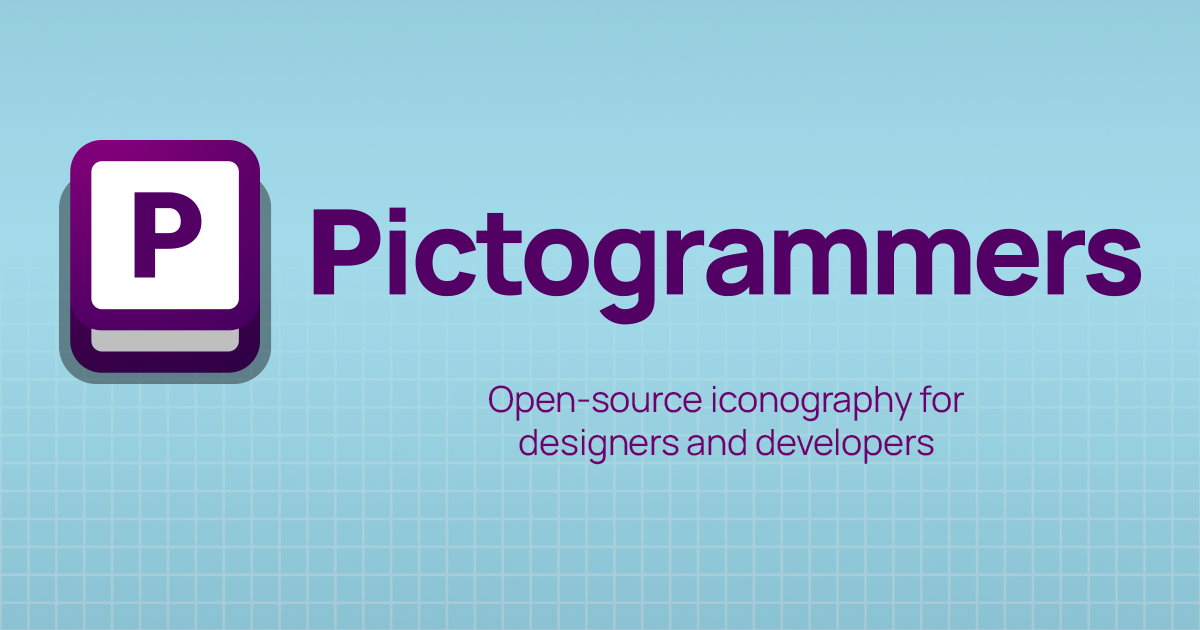
<style>
.page{position:relative;width:1200px;height:630px}
.page>*{position:absolute;margin:0}
.t1{font:36px "Manrope-Regular";letter-spacing:-0.01em;color:#700070}
</style>
<div class="page">
<p class="t1" style="left:488px;top:385px;width:477px;height:80px;text-align:center">Open-source iconography for<br>designers and developers</p>
</div>
